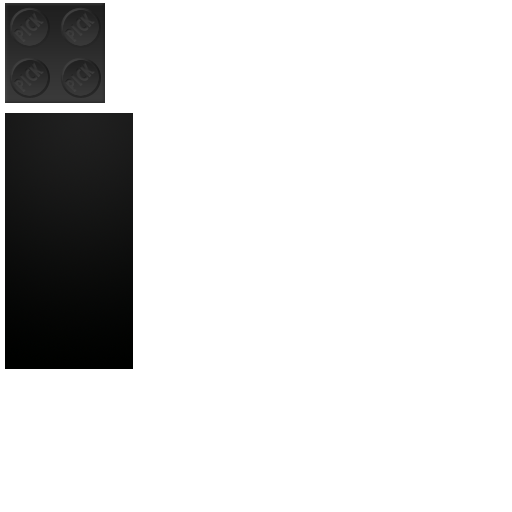
<style>
.page{position:relative;width:512px;height:512px;background:#ffffff}
.page>*{position:absolute;margin:0}
.t1{font:21.6px "TwCenMT-CondensedExtraBold";color:#404040;scale:0.78 1}
</style>
<div class="page">
<p class="t1" style="left:13px;top:11px;width:31px;height:31px;rotate:-45deg;opacity:0.6">PICK</p>
<p class="t1" style="left:64px;top:11px;width:31px;height:31px;rotate:-45deg;opacity:0.6">PICK</p>
<p class="t1" style="left:13px;top:61px;width:31px;height:31px;rotate:-45deg;opacity:0.6">PICK</p>
<p class="t1" style="left:64px;top:61px;width:31px;height:31px;rotate:-45deg;opacity:0.6">PICK</p>
</div>
